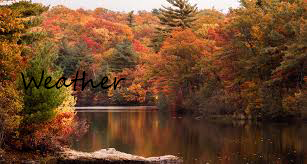
<style>
.page{position:relative;width:307px;height:164px}
.page>*{position:absolute;margin:0}
.t1{font:24px "SegoeScript";color:#000000}
</style>
<div class="page">
<p class="t1" style="left:21px;top:70px;width:104px;height:21px">Weather</p>
</div>
